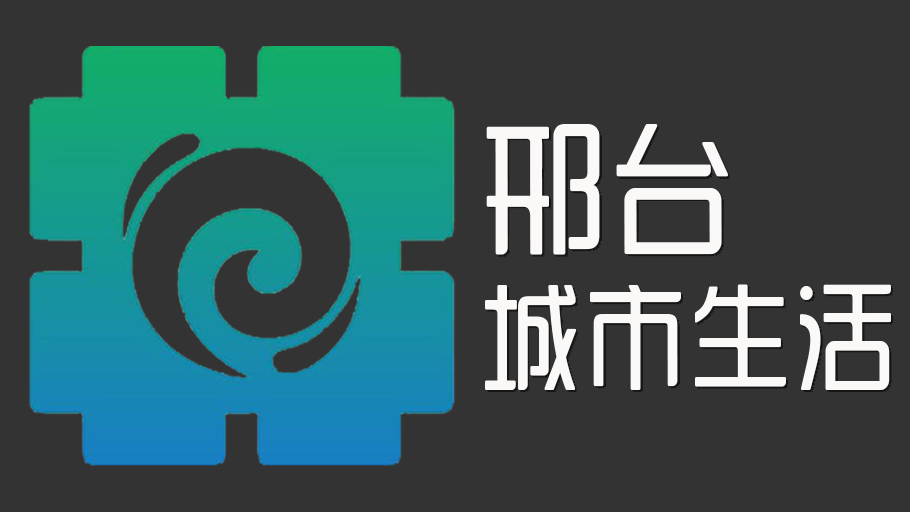
<style>
.page{position:relative;width:910px;height:512px;background:#333333}
.page>*{position:absolute;margin:0}
.t1{font:115.5px/160px "SJyunlvyuan";color:#fbf8f8;scale:0.91 1}
.t2{font:143px/160px "SJyunlvyuan";color:#fbf8f8;scale:0.91 1}
</style>
<div class="page">
<p class="t1" style="left:485px;top:124px;width:406px;height:266px"><span class="t2">邢台<br></span>城市生活</p>
</div>
